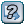
<style>
.page{position:relative;width:25px;height:25px;background:#ffffff}
.page>*{position:absolute;margin:0}
.t1{font:17px "Arial-BlackItalic";color:#bdcada}
</style>
<div class="page">
<p class="t1" style="left:7px;top:5px;width:10px;height:13px">?</p>
</div>
